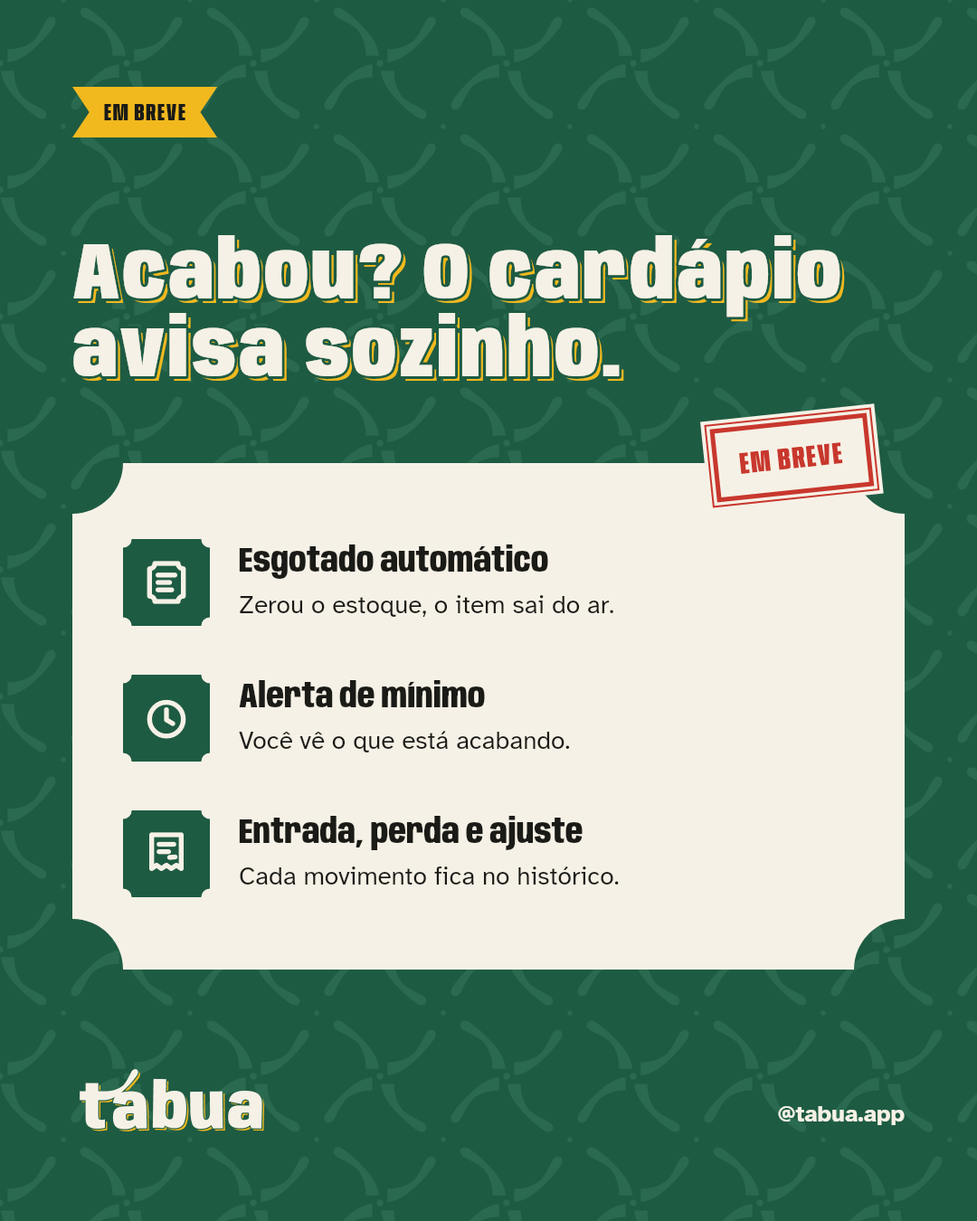
<style>
.page{position:relative;width:977px;height:1221px;background:#1e5b43}
.page>*{position:absolute;margin:0}
.t1{font:24.4px "Anybody-ExtraBold-W60";letter-spacing:0.06em;color:#1a1a17}
.t2{font:81.4px/77.8px "Anybody-Black-W75";letter-spacing:0.034em;color:#f6f1e6}
.t3{font:81.4px/77.8px "Anybody-Black-W75";letter-spacing:0.034em}
.t4{font:30.7px "Anybody-ExtraBold-W60";letter-spacing:0.06em;color:#c8372d}
.t5{font:34.4px "Anybody-ExtraBold-W75";color:#1a1a17}
.t6{font:25.3px "AtkinsonHyperlegible-Regular";color:#1a1a17}
.t7{font:23.5px "AtkinsonHyperlegible-Bold";color:#f6f1e6}
</style>
<div class="page">
<p class="t1" style="left:104px;top:104px;width:81px;height:16px">EM BREVE</p>
<p class="t2" style="left:71px;top:232px;width:772px;height:147px">Acabou? O cardápio<br>avisa sozinho.</p>
<p class="t3" style="left:78px;top:240px;width:767px;height:141px">Acabou? O cardápio<br>avisa sozinho.</p>
<p class="t4" style="left:739px;top:442px;width:104px;height:32px;rotate:-6deg">EM BREVE</p>
<p class="t5" style="left:239px;top:544px;width:309px;height:35px">Esgotado automático</p>
<p class="t6" style="left:240px;top:595px;width:373px;height:22px">Zerou o estoque, o item sai do ar.</p>
<p class="t5" style="left:239px;top:680px;width:246px;height:27px">Alerta de mínimo</p>
<p class="t6" style="left:239px;top:731px;width:331px;height:21px">Você vê o que está acabando.</p>
<p class="t5" style="left:239px;top:816px;width:343px;height:34px">Entrada, perda e ajuste</p>
<p class="t6" style="left:240px;top:866px;width:379px;height:18px">Cada movimento fica no histórico.</p>
<p class="t7" style="left:778px;top:1106px;width:126px;height:19px">@tabua.app</p>
</div>
